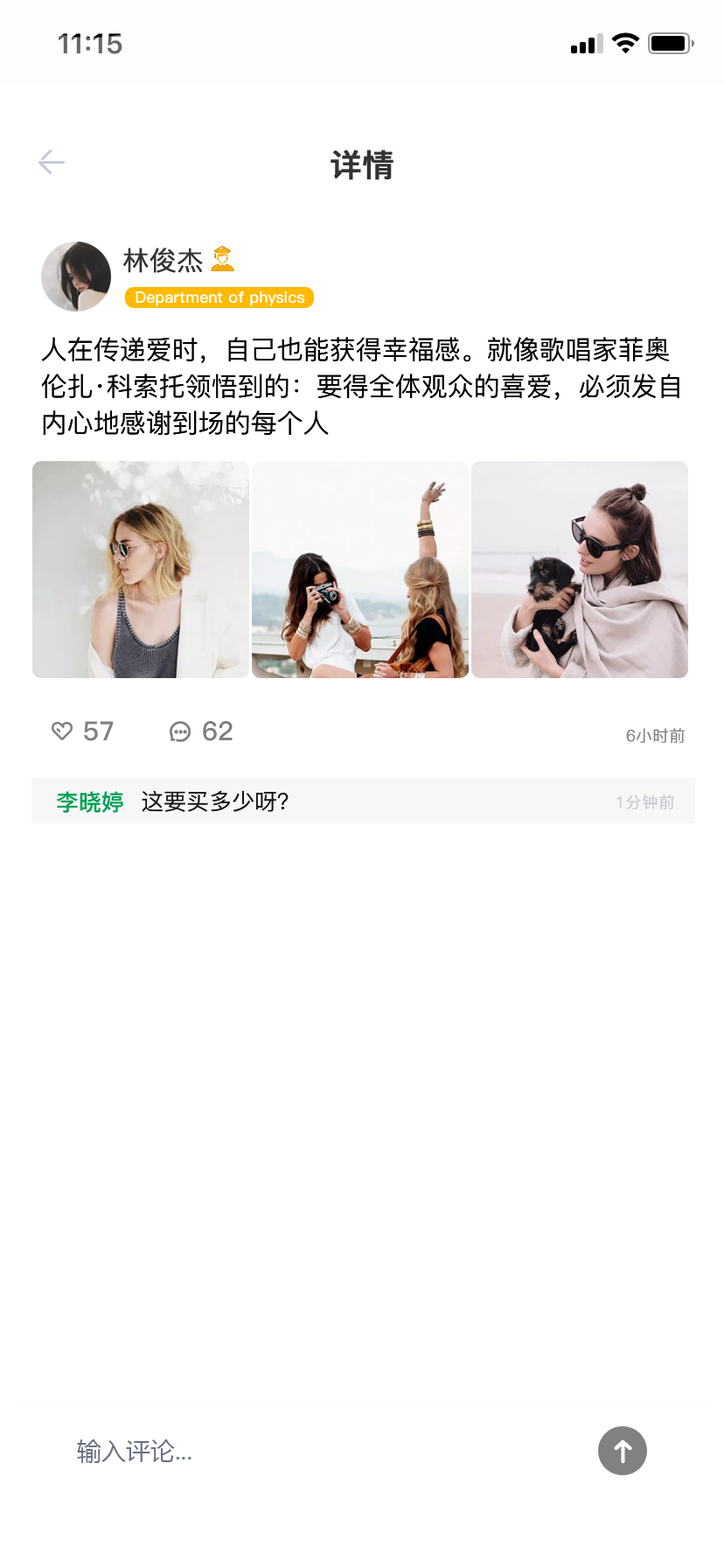
<style>
.page{position:relative;width:724px;height:1568px;background:#ffffff}
.page>*{position:absolute;margin:0}
.t1{font:31.5px "PingFang-SC-Bold";color:#323333;text-transform:uppercase;font-weight:bold}
.t2{font:26.2px "PingFang-SC-Regular";color:#323333;text-transform:uppercase;font-weight:bold}
.t3{font:15.8px "PingFang-SC-Bold";color:#ffffff}
.t4{font:26.2px/36.7px "PingFang-SC-Medium";color:#000000}
.t5{font:26.2px "PingFang-SC-Bold";color:#808080}
.t6{font:15.8px "PingFang-SC-Regular";color:#808080;text-transform:uppercase;font-weight:bold}
.t7{font:22.8px "PingFang-SC-Bold";color:#00a156}
.t8{font:22.8px "PingFang-SC-Medium";color:#111111}
.t9{font:15.8px "PingFang-SC-Regular";color:#c5c6d0;text-transform:uppercase;font-weight:bold}
.t10{font:24.5px "MicrosoftYaHei";color:#69707f}
</style>
<div class="page">
<p class="t1" style="left:331px;top:150px;width:63px;height:30px">详情</p>
<p class="t2" style="left:123px;top:248px;width:80px;height:25px">林俊杰</p>
<p class="t3" style="left:136px;top:290px;width:169px;height:16px">Department of physics</p>
<p class="t4" style="left:41px;top:337px;width:639px;height:98px">人在传递爱时，自己也能获得幸福感。就像歌唱家菲奧伦扎·科索托领悟到的：要得全体观众的喜爱，必须发自内心地感谢到场的每个人</p>
<p class="t5" style="left:84px;top:721px;width:30px;height:20px">57</p>
<p class="t5" style="left:203px;top:721px;width:30px;height:20px">62</p>
<p class="t6" style="left:626px;top:728px;width:59px;height:16px">6小时前</p>
<p class="t7" style="left:57px;top:791px;width:66px;height:22px">李晓婷</p>
<p class="t8" style="left:142px;top:790px;width:147px;height:22px">这要买多少呀？</p>
<p class="t9" style="left:617px;top:794px;width:58px;height:16px">1分钟前</p>
<p class="t10" style="left:77px;top:1439px;width:115px;height:24px">输入评论...</p>
</div>
